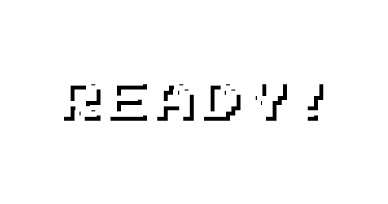
<style>
.page{position:relative;width:388px;height:204px;background:#ffffff}
.page>*{position:absolute;margin:0}
.t1{font:41.7px "Emulogic";letter-spacing:0.12em;color:#ffffff}
.t2{font:41.7px "Emulogic";letter-spacing:0.12em}
</style>
<div class="page">
<p class="t1" style="left:60px;top:80px;width:260px;height:37px">Ready!</p>
<p class="t2" style="left:64px;top:84px;width:260px;height:37px">Ready!</p>
</div>
